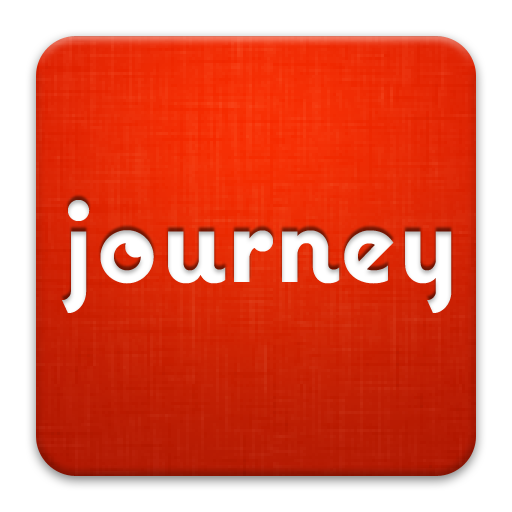
<style>
.page{position:relative;width:512px;height:512px;background:#ffffff}
.page>*{position:absolute;margin:0}
.t1{font:133px "Coquette-Bold";color:#ffffff}
</style>
<div class="page">
<p class="t1" style="left:62px;top:200px;width:390px;height:113px">journey</p>
</div>
